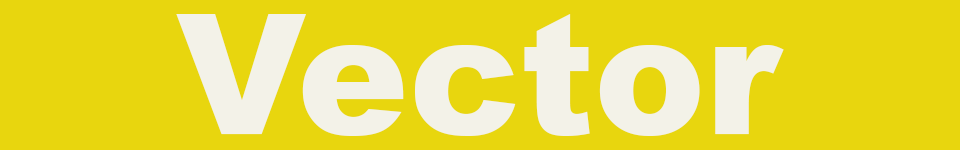
<style>
.page{position:relative;width:960px;height:150px;background:#e8d60e}
.page>*{position:absolute;margin:0}
.t1{font:166.7px "Arial-Black";color:#f3f2e8}
</style>
<div class="page">
<p class="t1" style="left:176px;top:14px;width:608px;height:122px">Vector</p>
</div>
